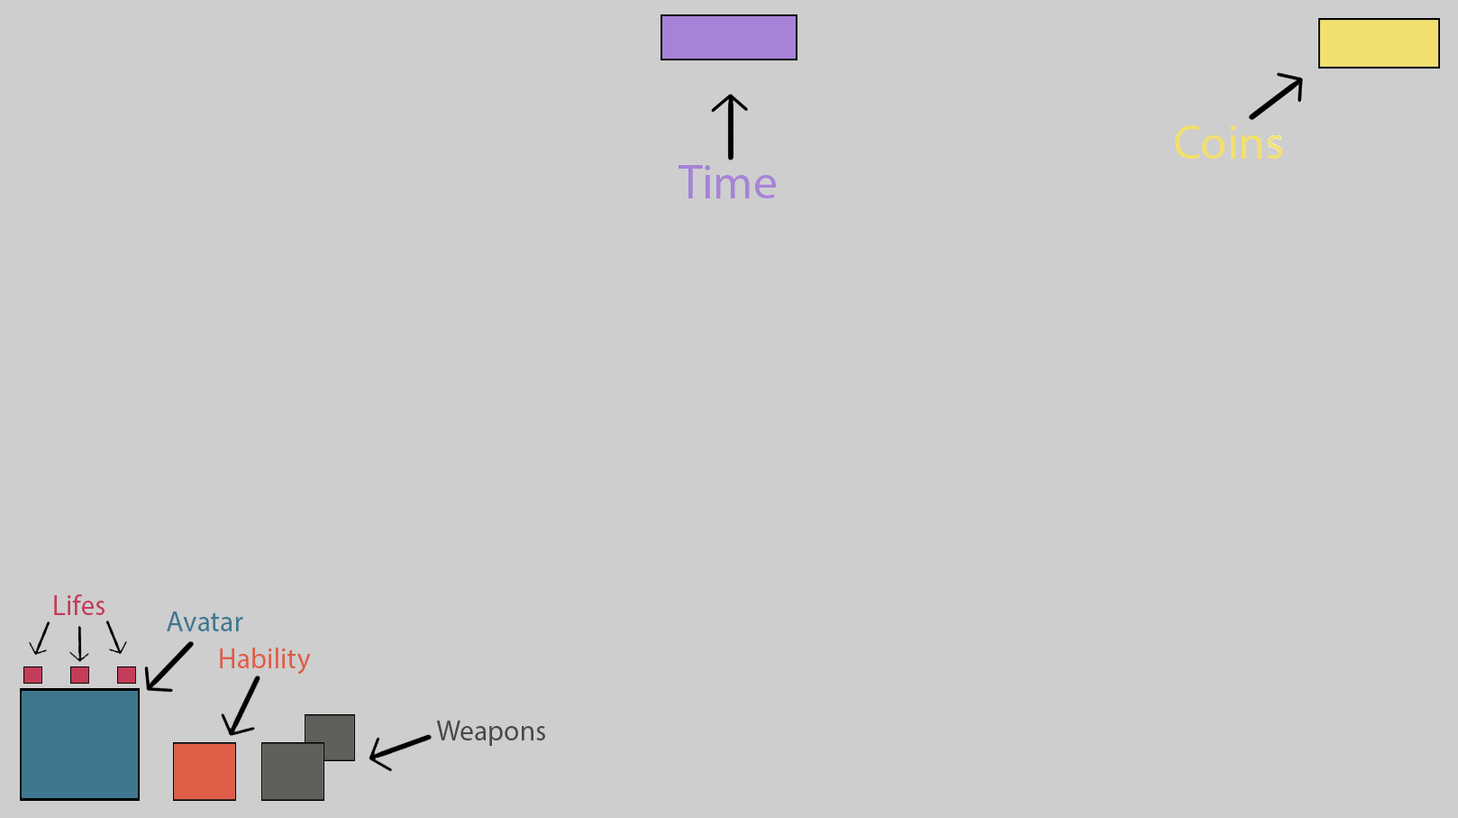
<style>
.page{position:relative;width:1458px;height:818px;background:#cecece}
.page>*{position:absolute;margin:0}
.t1{font:48.1px "MyriadPro-Regular";color:#f2e06e}
.t2{font:48.1px "MyriadPro-Regular";color:#a683d6}
.t3{font:28.6px "MyriadPro-Regular";color:#c33c59}
.t4{font:28.6px "MyriadPro-Regular";color:#3f778f}
.t5{font:28.6px "MyriadPro-Regular";color:#dd5d46}
.t6{font:28.6px "MyriadPro-Regular";color:#484846}
</style>
<div class="page">
<p class="t1" style="left:1175px;top:125px;width:108px;height:34px">Coins</p>
<p class="t2" style="left:679px;top:165px;width:97px;height:33px">Time</p>
<p class="t3" style="left:54px;top:594px;width:51px;height:21px">Lifes</p>
<p class="t4" style="left:167px;top:611px;width:76px;height:20px">Avatar</p>
<p class="t5" style="left:220px;top:647px;width:91px;height:27px">Hability</p>
<p class="t6" style="left:436px;top:720px;width:109px;height:25px">Weapons</p>
</div>
